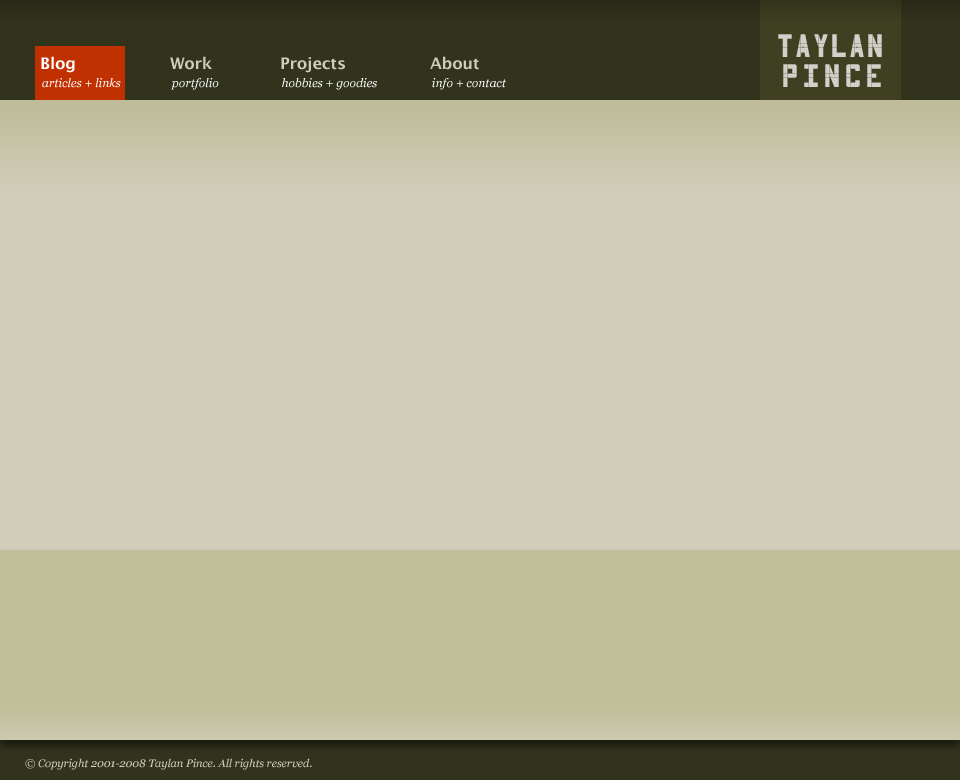
<style>
.page{position:relative;width:960px;height:780px;background:#d0cdb8}
.page>*{position:absolute;margin:0}
.t1{font:33.9px/29.4px "3x5";color:#d1d1ca;text-transform:uppercase}
.t2{font:33.9px/29.4px "3x5";letter-spacing:0.09em;color:#d1d1ca;text-transform:uppercase}
.t3{font:16px "LucidaGrande-Bold";color:#ffffff}
.t4{font:16px "LucidaGrande-Bold";color:#d0cdb8}
.t5{font:12px "Georgia-Italic";color:#ffffff}
.t6{font:11px "Georgia-Italic";color:#d0cdb8}
</style>
<div class="page">
<p class="t1" style="left:778px;top:34px;width:104px;height:53px;text-align:center">Taylan<br><span class="t2">Pince</span></p>
<p class="t3" style="left:41px;top:56px;width:34px;height:17px">Blog</p>
<p class="t4" style="left:170px;top:56px;width:42px;height:14px">Work</p>
<p class="t4" style="left:281px;top:57px;width:64px;height:16px">Projects</p>
<p class="t4" style="left:430px;top:56px;width:49px;height:14px">About</p>
<p class="t5" style="left:42px;top:78px;width:79px;height:10px">articles + links</p>
<p class="t5" style="left:170px;top:78px;width:49px;height:12px">portfolio</p>
<p class="t5" style="left:282px;top:78px;width:95px;height:12px">hobbies + goodies</p>
<p class="t5" style="left:432px;top:78px;width:75px;height:12px">info + contact</p>
<p class="t6" style="left:25px;top:758px;width:287px;height:12px">© Copyright 2001-2008 Taylan Pince. All rights reserved.</p>
</div>
